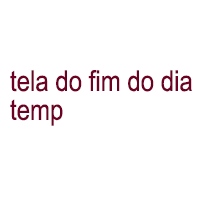
<style>
.page{position:relative;width:200px;height:200px;background:#ffffff}
.page>*{position:absolute;margin:0}
.t1{font:28.8px "ArialMT";color:#6e0023;scale:0.83 1}
</style>
<div class="page">
<p class="t1" style="left:10px;top:70px;width:182px;height:56px">tela do fim do dia<br>temp</p>
</div>
